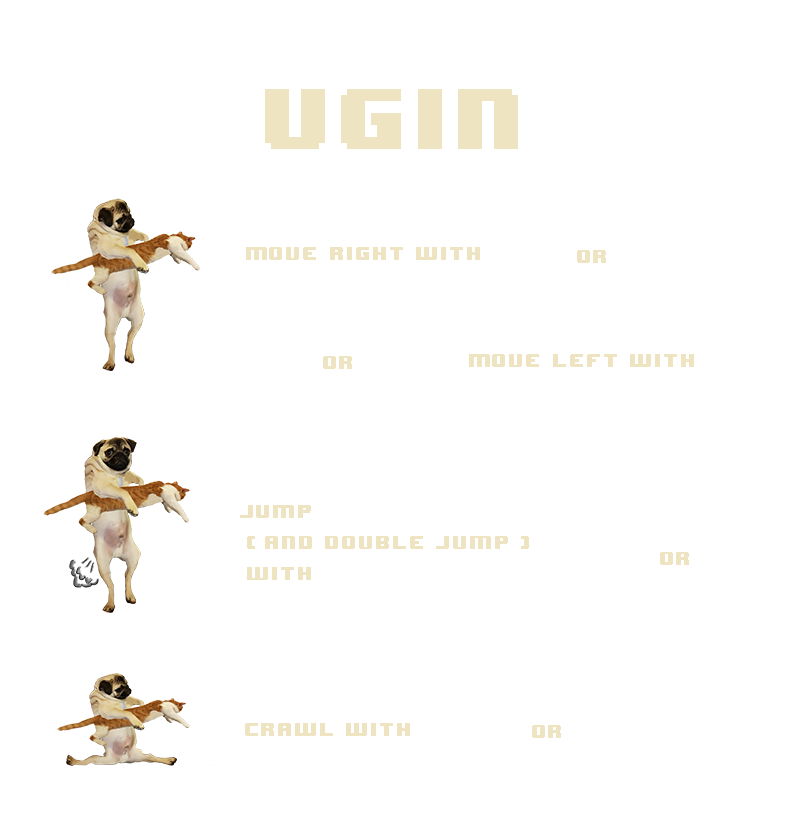
<style>
.page{position:relative;width:800px;height:821px;background:#ffffff}
.page>*{position:absolute;margin:0}
.t1{font:72px "8BITWONDERNominal";letter-spacing:0.06em;color:#eee4c1}
.t2{font:16px "8BITWONDERNominal";letter-spacing:0.06em;color:#eee4c1}
.t3{font:16px/31px "8BITWONDERNominal";letter-spacing:0.06em;color:#eee4c1}
</style>
<div class="page">
<p class="t1" style="left:265px;top:89px;width:253px;height:60px">UGIN</p>
<p class="t2" style="left:246px;top:247px;width:234px;height:13px">Move RIGHT WITH</p>
<p class="t2" style="left:577px;top:250px;width:29px;height:13px">or</p>
<p class="t2" style="left:323px;top:356px;width:29px;height:13px">or</p>
<p class="t2" style="left:469px;top:354px;width:225px;height:13px">Move LEFT WITH</p>
<p class="t3" style="left:240px;top:505px;width:289px;height:75px">JUMP<br> ( and double jump )<br> with</p>
<p class="t2" style="left:660px;top:552px;width:29px;height:13px">or</p>
<p class="t2" style="left:245px;top:723px;width:165px;height:13px">CRAWL WITH</p>
<p class="t2" style="left:532px;top:725px;width:29px;height:13px">or</p>
</div>
